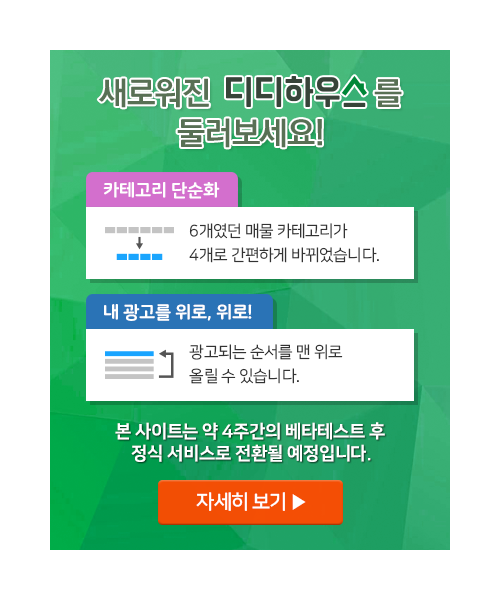
<style>
.page{position:relative;width:500px;height:600px;background:#ffffff}
.page>*{position:absolute;margin:0}
.t1{font:32px/40px "KoPubDotumPB";letter-spacing:-0.025em;color:#587054}
.t2{font:18px "NanumSquareRoundOTFEB";letter-spacing:-0.025em;color:#ffffff}
.t3{font:16px/24px "NanumSquareOTFR";letter-spacing:-0.025em;color:#333333}
.t4{font:18px/22px "NanumSquareOTFEB";letter-spacing:-0.025em;color:#ffffff}
.t5{font:20px "NanumSquareOTFB";letter-spacing:-0.05em;color:#fffffe}
</style>
<div class="page">
<p class="t1" style="left:98px;top:78px;width:304px;height:70px;text-align:center">새로워진                   를<br>둘러보세요!</p>
<p class="t2" style="left:103px;top:182px;width:117px;height:17px">카테고리 단순화</p>
<p class="t3" style="left:189px;top:223px;width:190px;height:40px">6개였던 매물 카테고리가<br>4개로 간편하게 바뀌었습니다.</p>
<p class="t2" style="left:104px;top:304px;width:148px;height:17px">내 광고를 위로, 위로!</p>
<p class="t3" style="left:189px;top:344px;width:154px;height:40px">광고되는 순서를 맨 위로<br>올릴 수 있습니다.</p>
<p class="t4" style="left:115px;top:422px;width:270px;height:40px;text-align:center">본 사이트는 약 4주간의 베타테스트 후 <br>정식 서비스로 전환될 예정입니다.</p>
<p class="t5" style="left:196px;top:492px;width:110px;height:19px">자세히 보기 ▶︎</p>
</div>
